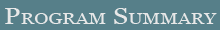
<style>
.page{position:relative;width:220px;height:30px;background:#567f89}
.page>*{position:absolute;margin:0}
.t1{font:21.8px "Georgia";letter-spacing:0.005em;color:#e8e8e8;font-variant:small-caps;scale:1.24 1}
</style>
<div class="page">
<p class="t1" style="left:5px;top:8px;width:212px;height:16px">Program Summary</p>
</div>
